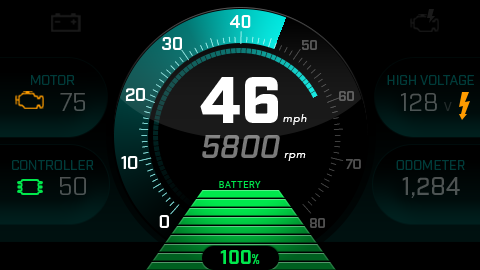
<style>
.page{position:relative;width:480px;height:270px;background:#000000}
.page>*{position:absolute;margin:0}
.t1{font:17.3px "Industry-Demi";color:#ffffff}
.t2{font:5.6px/42px "ArialNarrow";letter-spacing:1.25em;color:#99fffb;scale:0.7 1}
.t3{font:13.1px/42px "ArialNarrow";letter-spacing:1.25em;color:#99fffb;scale:0.3 1}
.t4{font:9.3px/42px "ArialNarrow";letter-spacing:1.25em;color:#99fffb;scale:0.42 1}
.t5{font:5.6px/42px "ArialNarrow";letter-spacing:1.25em;color:#4f4f4f;scale:0.7 1}
.t6{font:13.1px/42px "ArialNarrow";letter-spacing:1.25em;color:#4f4f4f;scale:0.3 1}
.t7{font:9.3px/42px "ArialNarrow";letter-spacing:1.25em;color:#4f4f4f;scale:0.42 1}
.t8{font:13.3px "Industry-Demi";color:#4f4f4f}
.t9{font:9.3px/42px "ArialNarrow";letter-spacing:1.04em;color:#000000;scale:0.42 1}
.t10{font:13.3px "Industry-Book";color:#003c3a}
.t11{font:64px "Industry-Black";color:#ffffff}
.t12{font:10.7px "Avenir-BookOblique";letter-spacing:0.1em;color:#ffffff}
.t13{font:32px "Industry-DemiItalic";color:#797979}
.t14{font:9.3px "Roboto-Regular";letter-spacing:0.05em;color:#00e94d}
.t15{font:18.7px "Industry-Bold";color:#00e94d}
.t16{font:13.3px "Industry-Bold";color:#00e94d}
</style>
<div class="page">
<p class="t1" style="left:229px;top:15px;width:22px;height:13px">40</p>
<p class="t2" style="left:139px;top:31px;width:205px;height:184px;text-align:center"><span class="t3">|</span>||||<span class="t4">|</span>||||<span class="t3">|</span>||||<span class="t4">|</span>||||<span class="t3">|</span>||||<span class="t4">|</span>||||<span class="t3">|</span>||||<span class="t4">|</span>||||<span class="t3">|</span>||||<span class="t4">|</span>|<span class="t5">|||</span><span class="t6">|</span><span class="t5">||||</span><span class="t7">|</span><span class="t5">||||</span><span class="t6">|</span><span class="t5">||||</span><span class="t7">|</span><span class="t5">||||</span><span class="t6">|</span><span class="t5">||||</span><span class="t7">|</span><span class="t5">||||</span><span class="t6">|</span></p>
<p class="t1" style="left:162px;top:37px;width:20px;height:13px">30</p>
<p class="t8" style="left:302px;top:40px;width:15px;height:10px">50</p>
<p class="t9" style="left:152px;top:47px;width:178px;height:155px;text-align:center">|||||||||||||||||||||||||||||||||||||||||||||||||||||||||||||||||||||||||||||||||</p>
<p class="t10" style="left:31px;top:75px;width:44px;height:10px">MOTOR</p>
<p class="t11" style="left:200px;top:77px;width:78px;height:46px">46</p>
<p class="t10" style="left:387px;top:75px;width:87px;height:10px">HIGH VOLTAGE</p>
<p class="t1" style="left:125px;top:88px;width:20px;height:13px">20</p>
<p class="t8" style="left:339px;top:91px;width:15px;height:10px">60</p>
<p class="t12" style="left:283px;top:114px;width:24px;height:11px">mph</p>
<p class="t13" style="left:202px;top:135px;width:78px;height:23px">5800</p>
<p class="t10" style="left:12px;top:160px;width:82px;height:10px">CONTROLLER</p>
<p class="t1" style="left:121px;top:156px;width:17px;height:13px">10</p>
<p class="t12" style="left:284px;top:153px;width:22px;height:8px">rpm</p>
<p class="t8" style="left:346px;top:159px;width:15px;height:10px">70</p>
<p class="t10" style="left:396px;top:160px;width:69px;height:10px">ODOMETER</p>
<p class="t14" style="left:219px;top:181px;width:42px;height:7px">BATTERY</p>
<p class="t1" style="left:159px;top:215px;width:10px;height:13px">0</p>
<p class="t8" style="left:310px;top:218px;width:15px;height:10px">80</p>
<p class="t15" style="left:220px;top:250px;width:40px;height:14px">100<span class="t16">%</span></p>
</div>
